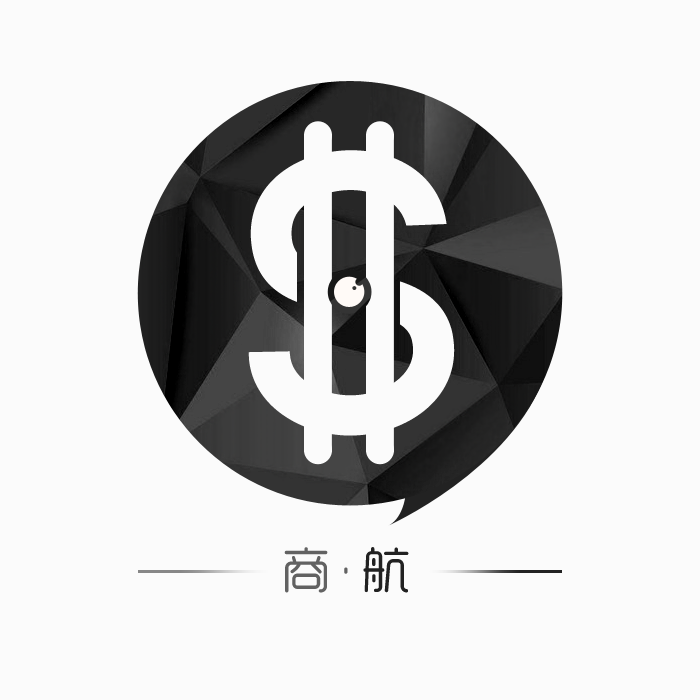
<style>
.page{position:relative;width:700px;height:700px;background:#fbfbfb}
.page>*{position:absolute;margin:0}
.t1{font:400px "Code-Pro-Demo";color:#fbfbfb;text-transform:uppercase}
.t2{font:50px "RTWSYueRoudGoDemo-Regular";letter-spacing:0.1em;color:#626262;text-transform:uppercase}
.t3{font:50px "RTWSYueRoudGoDemo-Regular";letter-spacing:0.1em;color:#212121;text-transform:uppercase}
</style>
<div class="page">
<p class="t1" style="left:248px;top:150px;width:207px;height:286px">S</p>
<p class="t2" style="left:284px;top:547px;width:125px;height:46px">商·<span class="t3">航</span></p>
</div>
